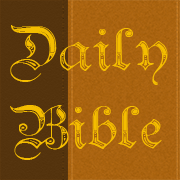
<style>
.page{position:relative;width:180px;height:180px}
.page>*{position:absolute;margin:0}
.t1{font:50.1px/78px "TeutonicNo4-DemiBold";color:#f4bd00}
</style>
<div class="page">
<p class="t1" style="left:10px;top:25px;width:158px;height:135px">Daily<br>Bible</p>
</div>
